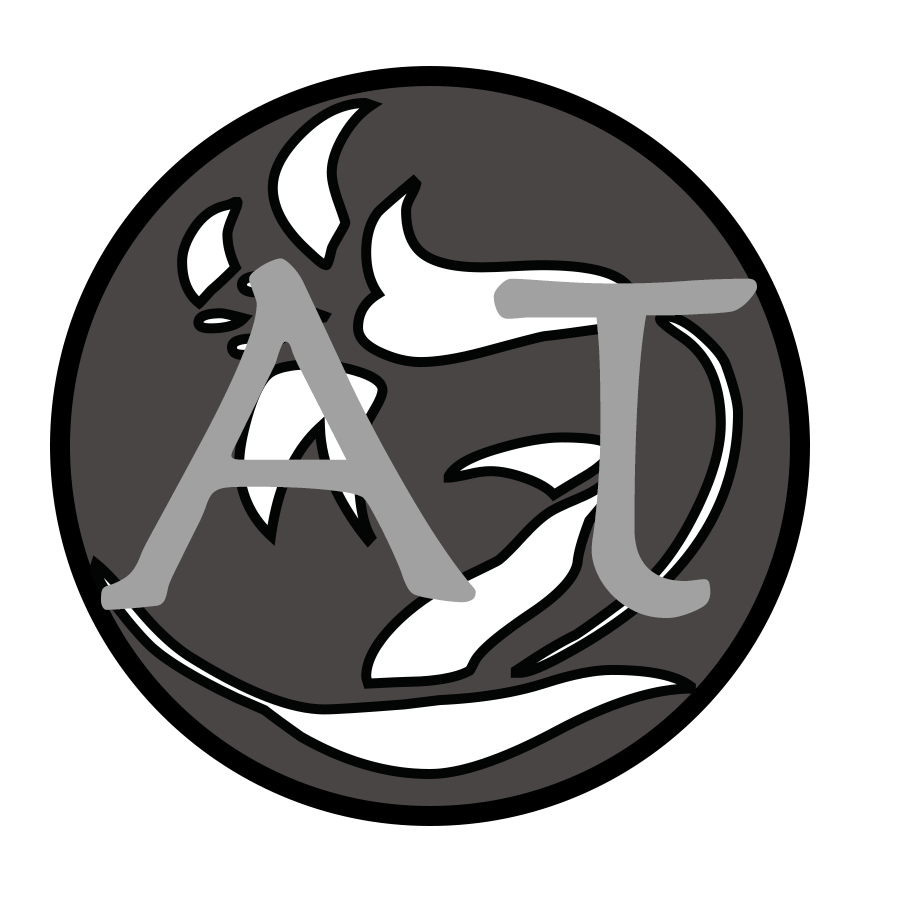
<style>
.page{position:relative;width:900px;height:900px;background:#ffffff}
.page>*{position:absolute;margin:0}
.t1{font:583.3px "Herculanum";color:#a1a1a1}
</style>
<div class="page">
<p class="t1" style="left:101px;top:258px;width:656px;height:360px">AT</p>
</div>
